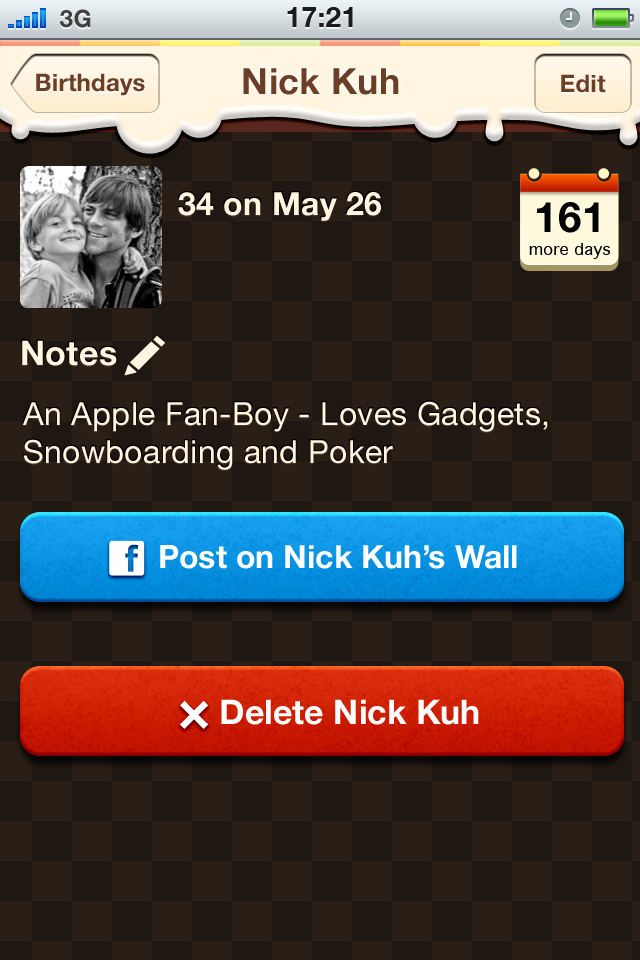
<style>
.page{position:relative;width:640px;height:960px;background:#2a1f17}
.page>*{position:absolute;margin:0}
.t1{font:24px "HelveticaNeue-Bold";color:#404040;text-transform:uppercase}
.t2{font:28px "HelveticaNeue-Bold";color:#1a1b1b;text-transform:uppercase}
.t3{font:24px "HelveticaNeue-Bold";letter-spacing:0.01em;color:#6a3e27}
.t4{font:36px "HelveticaNeue-Bold";letter-spacing:0.01em;color:#6a3e27}
.t5{font:32px "HelveticaNeue-Bold";letter-spacing:0.01em;color:#fff5e1}
.t6{font:42px "HelveticaNeue-Bold";letter-spacing:0.01em;color:#010101}
.t7{font:16px "GenevaCY";letter-spacing:0.01em;color:#000000}
.t8{font:34px "HelveticaNeue-Bold";letter-spacing:0.01em;color:#fff5e1}
.t9{font:32px "HelveticaNeue";letter-spacing:0.01em;color:#fff5e1}
.t10{font:32px "HelveticaNeue-Bold";color:#ffffff}
.t11{font:60px "HelveticaNeue-Bold";color:#ffffff}
.t12{font:34px "HelveticaNeue-Bold";color:#ffffff}
</style>
<div class="page">
<p class="t1" style="left:60px;top:9px;width:31px;height:19px">3G</p>
<p class="t2" style="left:287px;top:7px;width:66px;height:20px">17:21</p>
<p class="t3" style="left:36px;top:73px;width:109px;height:23px">Birthdays</p>
<p class="t4" style="left:243px;top:68px;width:156px;height:27px">Nick Kuh</p>
<p class="t3" style="left:561px;top:74px;width:45px;height:19px">Edit</p>
<p class="t5" style="left:178px;top:192px;width:203px;height:29px">34 on May 26</p>
<p class="t6" style="left:537px;top:202px;width:62px;height:31px">161</p>
<p class="t7" style="left:529px;top:243px;width:81px;height:16px">more days</p>
<p class="t8" style="left:22px;top:340px;width:95px;height:26px">Notes</p>
<p class="t9" style="left:22px;top:401px;width:526px;height:69px">An Apple Fan-Boy - Loves Gadgets, <br>Snowboarding and Poker</p>
<p class="t10" style="left:160px;top:545px;width:357px;height:24px">Post on Nick Kuh’s Wall</p>
<p class="t11" style="left:179px;top:700px;width:30px;height:29px">×</p>
<p class="t12" style="left:221px;top:699px;width:258px;height:26px">Delete Nick Kuh</p>
</div>
